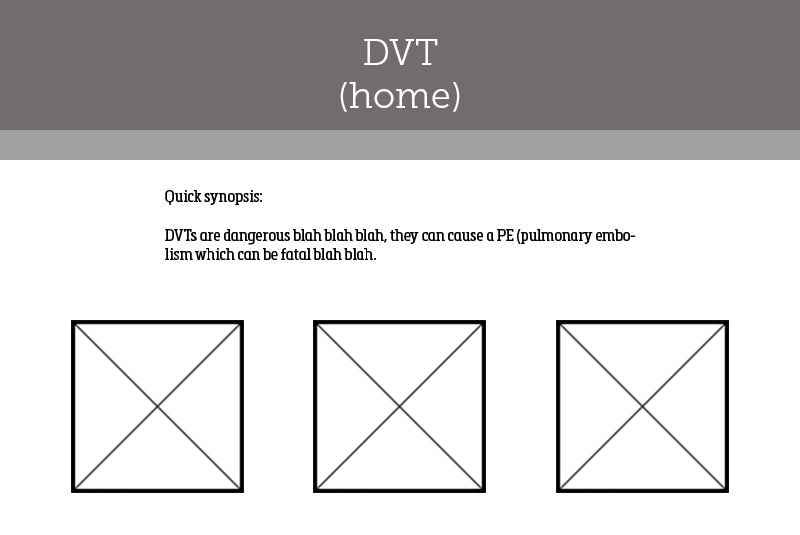
<style>
.page{position:relative;width:800px;height:535px;background:#ffffff}
.page>*{position:absolute;margin:0}
.t1{font:36px "MuseoSlab-300";color:#ffffff}
.t2{font:16px "MetronicSlabNarrowRegular";color:#000000}
</style>
<div class="page">
<p class="t1" style="left:340px;top:39px;width:120px;height:73px;text-align:center">DVT<br>(home)</p>
<p class="t2" style="left:165px;top:190px;width:471px;height:70px">Quick synopsis:<br><br>DVTs are dangerous blah blah blah, they can cause a PE (pulmonary embolism which can be fatal blah blah.</p>
</div>
